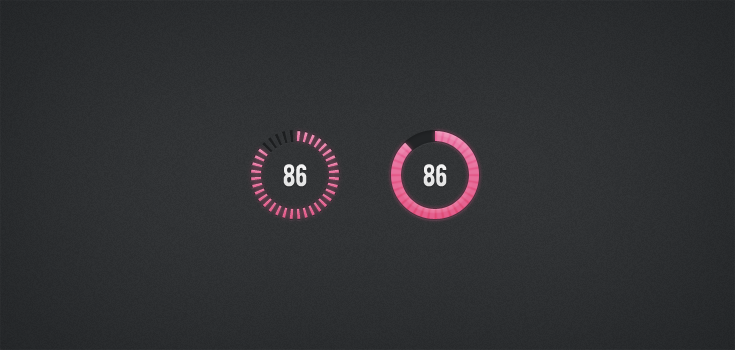
<style>
.page{position:relative;width:735px;height:350px}
.page>*{position:absolute;margin:0}
.t1{font:24px "Bebas";color:#ebebeb;text-transform:uppercase}
</style>
<div class="page">
<p class="t1" style="left:283px;top:164px;width:24px;height:23px">86</p>
<p class="t1" style="left:423px;top:164px;width:24px;height:23px">86</p>
</div>
